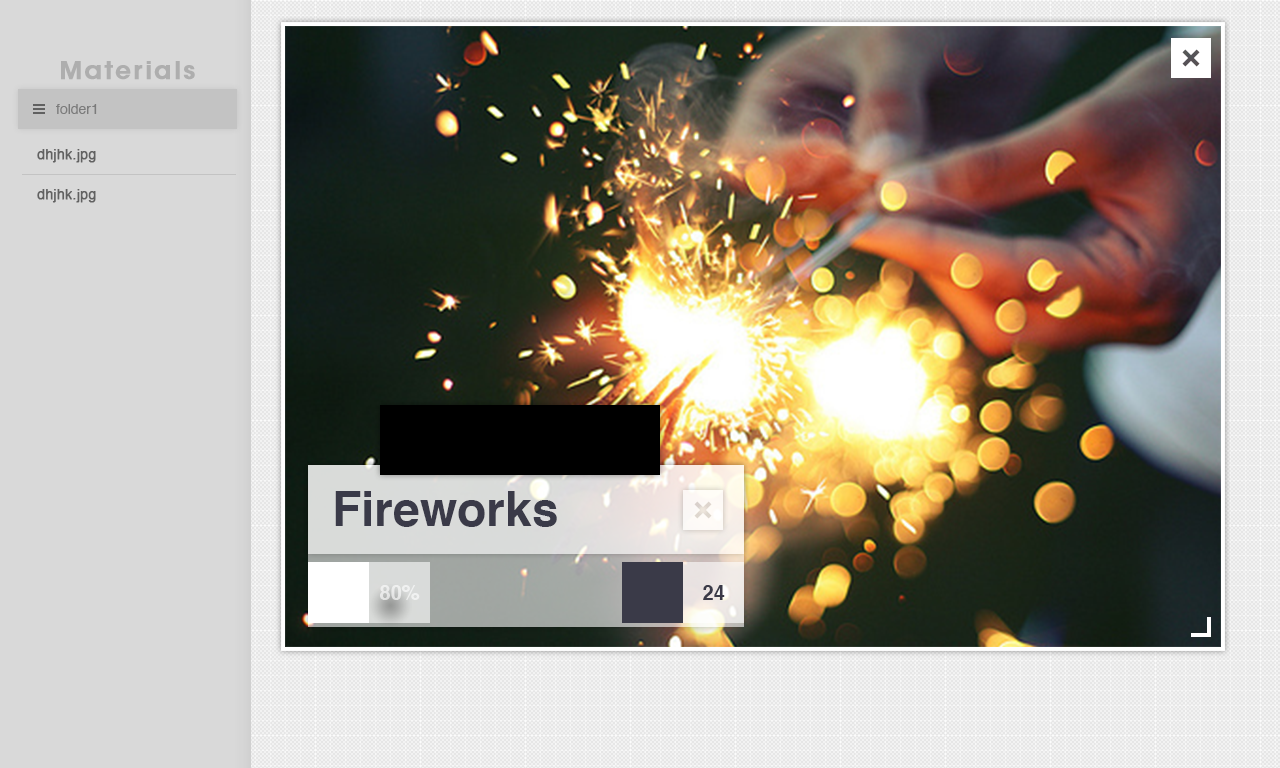
<style>
.page{position:relative;width:1280px;height:768px}
.page>*{position:absolute;margin:0}
.t1{font:14px "Helvetica";color:#7b7b7b}
.t2{font:14px "Helvetica";color:#616161;font-weight:bold}
.t3{font:48px "Helvetica-Bold";color:#3a3a48}
.t4{font:20px "Helvetica-Bold";color:#ffffff}
.t5{font:20px "Helvetica-Bold";color:#3a3a48}
</style>
<div class="page">
<p class="t1" style="left:56px;top:104px;width:41px;height:10px">folder1</p>
<p class="t2" style="left:37px;top:149px;width:59px;height:14px">dhjhk.jpg</p>
<p class="t2" style="left:37px;top:189px;width:59px;height:14px">dhjhk.jpg</p>
<p class="t3" style="left:335px;top:491px;width:222px;height:36px">Fireworks</p>
<p class="t4" style="left:380px;top:585px;width:40px;height:15px;opacity:0.6">80%</p>
<p class="t5" style="left:703px;top:585px;width:22px;height:15px">24</p>
</div>
